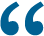
<style>
.page{position:relative;width:44px;height:36px;background:#ffffff}
.page>*{position:absolute;margin:0}
.t1{font:136.7px "EuphemiaUCAS";color:#006092;font-variant:small-caps}
</style>
<div class="page">
<p class="t1" style="left:0px;top:1px;width:44px;height:35px">“</p>
</div>
